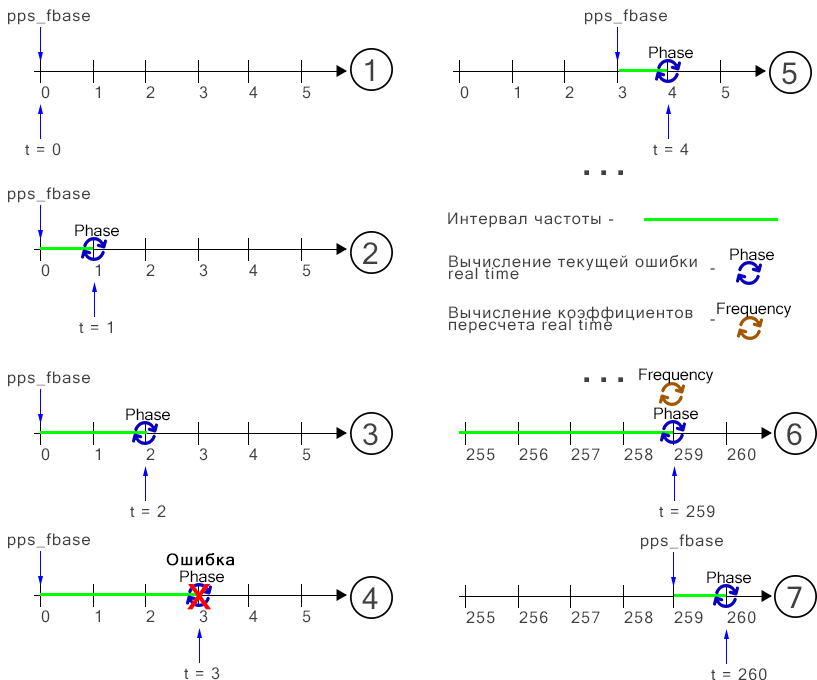
<style>
.page{position:relative;width:817px;height:680px;background:#ffffff}
.page>*{position:absolute;margin:0}
.t1{font:16px "MicrosoftSansSerif";letter-spacing:0.075em;color:#414141}
.t2{font:16px "MicrosoftSansSerif";color:#000000}
.t3{font:30px "MicrosoftSansSerif";letter-spacing:0.075em;color:#414141}
.t4{font:48px "MicrosoftSansSerif";letter-spacing:0.075em;color:#414141}
.t5{font:16px/12px "MicrosoftSansSerif";letter-spacing:0.075em;color:#414141}
.t6{font:16px "MicrosoftSansSerif";letter-spacing:0.075em}
.t7{font:16px "MicrosoftSansSerif";letter-spacing:0.075em;color:#000000;font-weight:bold}
.t8{font:35px "MicrosoftSansSerif";letter-spacing:0.075em;color:#ff0000;font-weight:bold}
</style>
<div class="page">
<p class="t1" style="left:8px;top:9px;width:82px;height:16px">pps_fbase</p>
<p class="t1" style="left:585px;top:9px;width:82px;height:16px">pps_fbase</p>
<p class="t2" style="left:649px;top:46px;width:44px;height:13px">Phase</p>
<p class="t3" style="left:365px;top:59px;width:9px;height:22px">1</p>
<p class="t3" style="left:782px;top:62px;width:15px;height:23px">5</p>
<p class="t1" style="left:41px;top:86px;width:9px;height:13px">0</p>
<p class="t1" style="left:95px;top:86px;width:5px;height:12px">1</p>
<p class="t1" style="left:146px;top:86px;width:9px;height:12px">2</p>
<p class="t1" style="left:199px;top:86px;width:9px;height:13px">3</p>
<p class="t1" style="left:249px;top:86px;width:9px;height:12px">4</p>
<p class="t1" style="left:302px;top:86px;width:9px;height:13px">5</p>
<p class="t1" style="left:460px;top:86px;width:9px;height:13px">0</p>
<p class="t1" style="left:514px;top:86px;width:5px;height:12px">1</p>
<p class="t1" style="left:565px;top:86px;width:9px;height:12px">2</p>
<p class="t1" style="left:618px;top:86px;width:9px;height:13px">3</p>
<p class="t1" style="left:668px;top:86px;width:9px;height:12px">4</p>
<p class="t1" style="left:721px;top:86px;width:9px;height:13px">5</p>
<p class="t1" style="left:25px;top:143px;width:36px;height:13px">t = 0</p>
<p class="t1" style="left:653px;top:143px;width:36px;height:12px">t = 4</p>
<p class="t4" style="left:584px;top:170px;width:39px;height:5px">...</p>
<p class="t1" style="left:8px;top:187px;width:82px;height:16px">pps_fbase</p>
<p class="t1" style="left:448px;top:212px;width:166px;height:16px">Интервал частоты -</p>
<p class="t2" style="left:75px;top:224px;width:44px;height:13px">Phase</p>
<p class="t3" style="left:363px;top:242px;width:15px;height:22px">2</p>
<p class="t5" style="left:449px;top:255px;width:248px;height:25px">Вычисление текущей ошибки<br>real time</p>
<p class="t2" style="left:730px;top:248px;width:44px;height:13px">Phase</p>
<p class="t1" style="left:41px;top:264px;width:9px;height:13px">0</p>
<p class="t1" style="left:95px;top:264px;width:5px;height:12px">1</p>
<p class="t1" style="left:146px;top:264px;width:9px;height:12px">2</p>
<p class="t1" style="left:199px;top:264px;width:9px;height:13px">3</p>
<p class="t1" style="left:249px;top:264px;width:9px;height:12px">4</p>
<p class="t1" style="left:302px;top:264px;width:9px;height:13px">5</p>
<p class="t6" style="left:710px;top:268px;width:5px;height:2px">-</p>
<p class="t2" style="left:717px;top:302px;width:75px;height:16px">Frequency</p>
<p class="t5" style="left:449px;top:306px;width:244px;height:28px">Вычисление коэффициентов<br>пересчета real time</p>
<p class="t1" style="left:79px;top:321px;width:33px;height:12px">t = 1</p>
<p class="t6" style="left:710px;top:319px;width:5px;height:2px">-</p>
<p class="t1" style="left:8px;top:371px;width:82px;height:16px">pps_fbase</p>
<p class="t4" style="left:584px;top:377px;width:39px;height:5px">...</p>
<p class="t2" style="left:639px;top:368px;width:75px;height:16px">Frequency</p>
<p class="t2" style="left:126px;top:408px;width:44px;height:13px">Phase</p>
<p class="t2" style="left:654px;top:407px;width:44px;height:13px">Phase</p>
<p class="t3" style="left:363px;top:423px;width:15px;height:23px">3</p>
<p class="t3" style="left:787px;top:423px;width:15px;height:23px">6</p>
<p class="t1" style="left:41px;top:448px;width:9px;height:13px">0</p>
<p class="t1" style="left:95px;top:448px;width:5px;height:12px">1</p>
<p class="t1" style="left:146px;top:448px;width:9px;height:12px">2</p>
<p class="t1" style="left:199px;top:448px;width:9px;height:13px">3</p>
<p class="t1" style="left:249px;top:448px;width:9px;height:12px">4</p>
<p class="t1" style="left:302px;top:448px;width:9px;height:13px">5</p>
<p class="t1" style="left:466px;top:448px;width:29px;height:13px">255</p>
<p class="t1" style="left:519px;top:448px;width:29px;height:13px">256</p>
<p class="t1" style="left:571px;top:448px;width:29px;height:13px">257</p>
<p class="t1" style="left:624px;top:448px;width:29px;height:13px">258</p>
<p class="t1" style="left:674px;top:448px;width:29px;height:13px">259</p>
<p class="t1" style="left:727px;top:448px;width:29px;height:13px">260</p>
<p class="t1" style="left:130px;top:505px;width:36px;height:12px">t = 2</p>
<p class="t1" style="left:659px;top:505px;width:56px;height:13px">t = 259</p>
<p class="t1" style="left:8px;top:533px;width:82px;height:16px">pps_fbase</p>
<p class="t1" style="left:641px;top:534px;width:82px;height:16px">pps_fbase</p>
<p class="t7" style="left:166px;top:553px;width:68px;height:13px">Ошибка</p>
<p class="t2" style="left:180px;top:570px;width:44px;height:13px">Phase</p>
<p class="t2" style="left:707px;top:571px;width:44px;height:13px">Phase</p>
<p class="t8" style="left:187px;top:584px;width:24px;height:26px">X</p>
<p class="t3" style="left:362px;top:587px;width:16px;height:22px">4</p>
<p class="t3" style="left:787px;top:586px;width:15px;height:22px">7</p>
<p class="t1" style="left:41px;top:610px;width:9px;height:13px">0</p>
<p class="t1" style="left:95px;top:610px;width:5px;height:12px">1</p>
<p class="t1" style="left:146px;top:610px;width:9px;height:12px">2</p>
<p class="t1" style="left:199px;top:610px;width:9px;height:13px">3</p>
<p class="t1" style="left:249px;top:610px;width:9px;height:12px">4</p>
<p class="t1" style="left:302px;top:610px;width:9px;height:13px">5</p>
<p class="t1" style="left:466px;top:611px;width:29px;height:13px">255</p>
<p class="t1" style="left:519px;top:611px;width:29px;height:13px">256</p>
<p class="t1" style="left:571px;top:611px;width:29px;height:13px">257</p>
<p class="t1" style="left:624px;top:611px;width:29px;height:13px">258</p>
<p class="t1" style="left:674px;top:611px;width:29px;height:13px">259</p>
<p class="t1" style="left:727px;top:611px;width:29px;height:13px">260</p>
<p class="t1" style="left:184px;top:667px;width:36px;height:13px">t = 3</p>
<p class="t1" style="left:711px;top:668px;width:56px;height:13px">t = 260</p>
</div>
